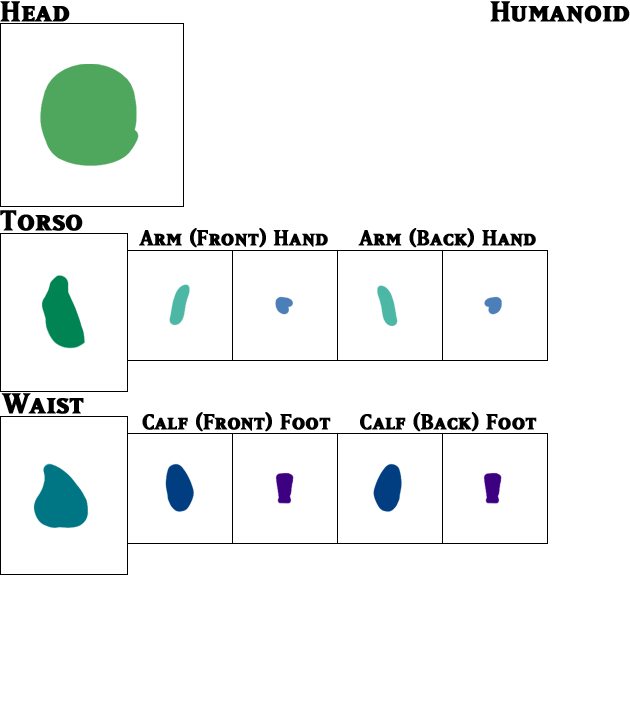
<style>
.page{position:relative;width:630px;height:720px;background:#ffffff}
.page>*{position:absolute;margin:0}
.t1{font:33.3px "MatrixBoldSmallCaps";color:#000000;font-weight:bold}
.t2{font:25px "MatrixBoldSmallCaps";color:#000000;font-weight:bold}
</style>
<div class="page">
<p class="t1" style="left:0px;top:1px;width:70px;height:21px">Head</p>
<p class="t1" style="left:490px;top:1px;width:140px;height:23px">Humanoid</p>
<p class="t1" style="left:0px;top:210px;width:83px;height:21px">Torso</p>
<p class="t2" style="left:139px;top:228px;width:189px;height:20px">Arm (Front) Hand</p>
<p class="t2" style="left:358px;top:228px;width:178px;height:20px">Arm (Back) Hand</p>
<p class="t1" style="left:1px;top:393px;width:83px;height:21px">Waist</p>
<p class="t2" style="left:142px;top:412px;width:189px;height:20px">Calf (Front) Foot</p>
<p class="t2" style="left:360px;top:412px;width:177px;height:20px">Calf (Back) Foot</p>
</div>
